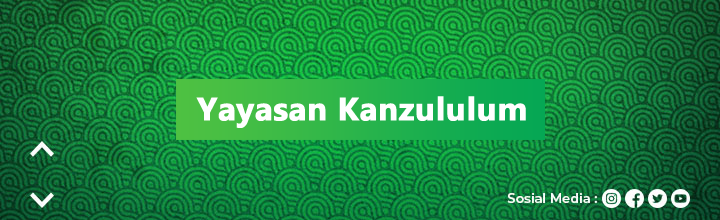
<style>
.page{position:relative;width:720px;height:220px}
.page>*{position:absolute;margin:0}
.t1{font:31.7px "Ebrima-Bold";color:#ffffff;font-weight:bold;scale:1.03 1}
</style>
<div class="page">
<p class="t1" style="left:196px;top:96px;width:330px;height:32px">Yayasan Kanzululum</p>
</div>
